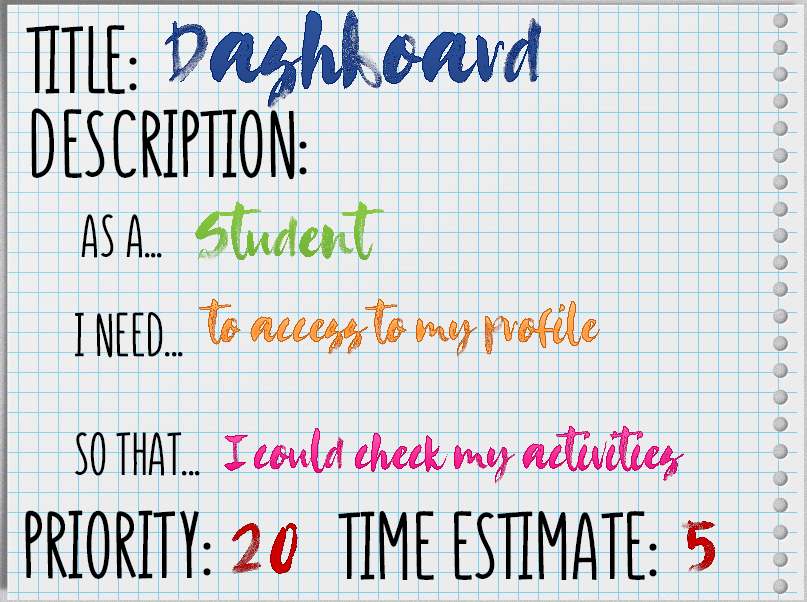
<style>
.page{position:relative;width:807px;height:602px}
.page>*{position:absolute;margin:0}
.t1{font:97.9px "Almost-SVG";color:#27498f}
.t2{font:93.3px "MonlyLite-Bold";color:#000000}
.t3{font:62.2px "Almost-SVG";color:#7cbc3c}
.t4{font:59.7px "MonlyLite-Bold";color:#000000}
.t5{font:48.7px "Almost-SVG"}
.t6{font:79.1px "Almost-SVG"}
</style>
<div class="page">
<p class="t1" style="left:165px;top:9px;width:376px;height:101px">Dashboard</p>
<p class="t2" style="left:26px;top:25px;width:111px;height:69px">Title:</p>
<p class="t2" style="left:31px;top:108px;width:276px;height:72px">Description:</p>
<p class="t3" style="left:195px;top:201px;width:189px;height:60px">Student</p>
<p class="t4" style="left:81px;top:214px;width:81px;height:44px">As a...</p>
<p class="t5" style="left:199px;top:298px;width:402px;height:59px">to access to my profile</p>
<p class="t4" style="left:75px;top:312px;width:108px;height:46px">I need...</p>
<p class="t5" style="left:224px;top:425px;width:460px;height:59px">I could check my activities</p>
<p class="t4" style="left:74px;top:432px;width:126px;height:44px">So that...</p>
<p class="t2" style="left:25px;top:510px;width:186px;height:69px">priority:</p>
<p class="t2" style="left:338px;top:511px;width:319px;height:69px">time estimate:</p>
<p class="t6" style="left:680px;top:520px;width:36px;height:53px">5</p>
<p class="t6" style="left:230px;top:523px;width:68px;height:51px">20</p>
</div>
